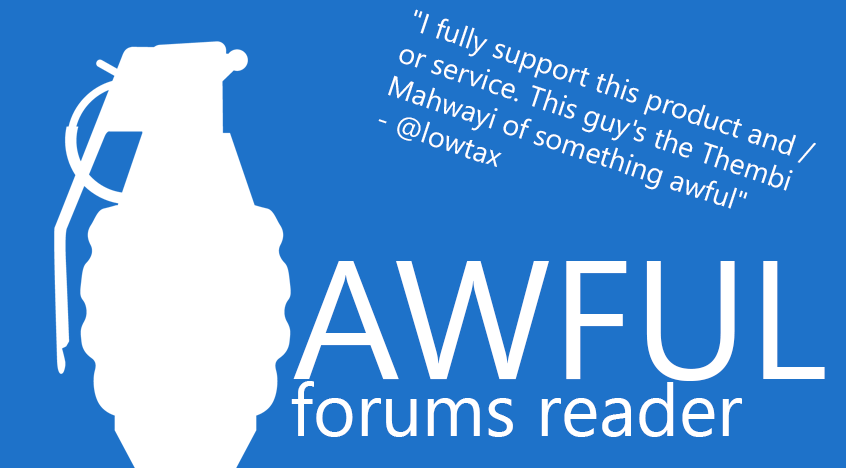
<style>
.page{position:relative;width:846px;height:468px;background:#1e72c9}
.page>*{position:absolute;margin:0}
.t1{font:28.8px "SegoeUI";color:#ffffff}
.t2{font:167.8px "SegoeUI";color:#ffffff}
.t3{font:73px "SegoeUI";color:#ffffff}
</style>
<div class="page">
<p class="t1" style="left:378px;top:9px;width:438px;height:200px;rotate:18deg">"I fully support this product and / or service. This guy's the Thembi Mahwayi of something awful"<br>- @lowtax</p>
<p class="t2" style="left:293px;top:261px;width:532px;height:120px">AWFUL</p>
<p class="t3" style="left:291px;top:381px;width:451px;height:56px">forums reader</p>
</div>
